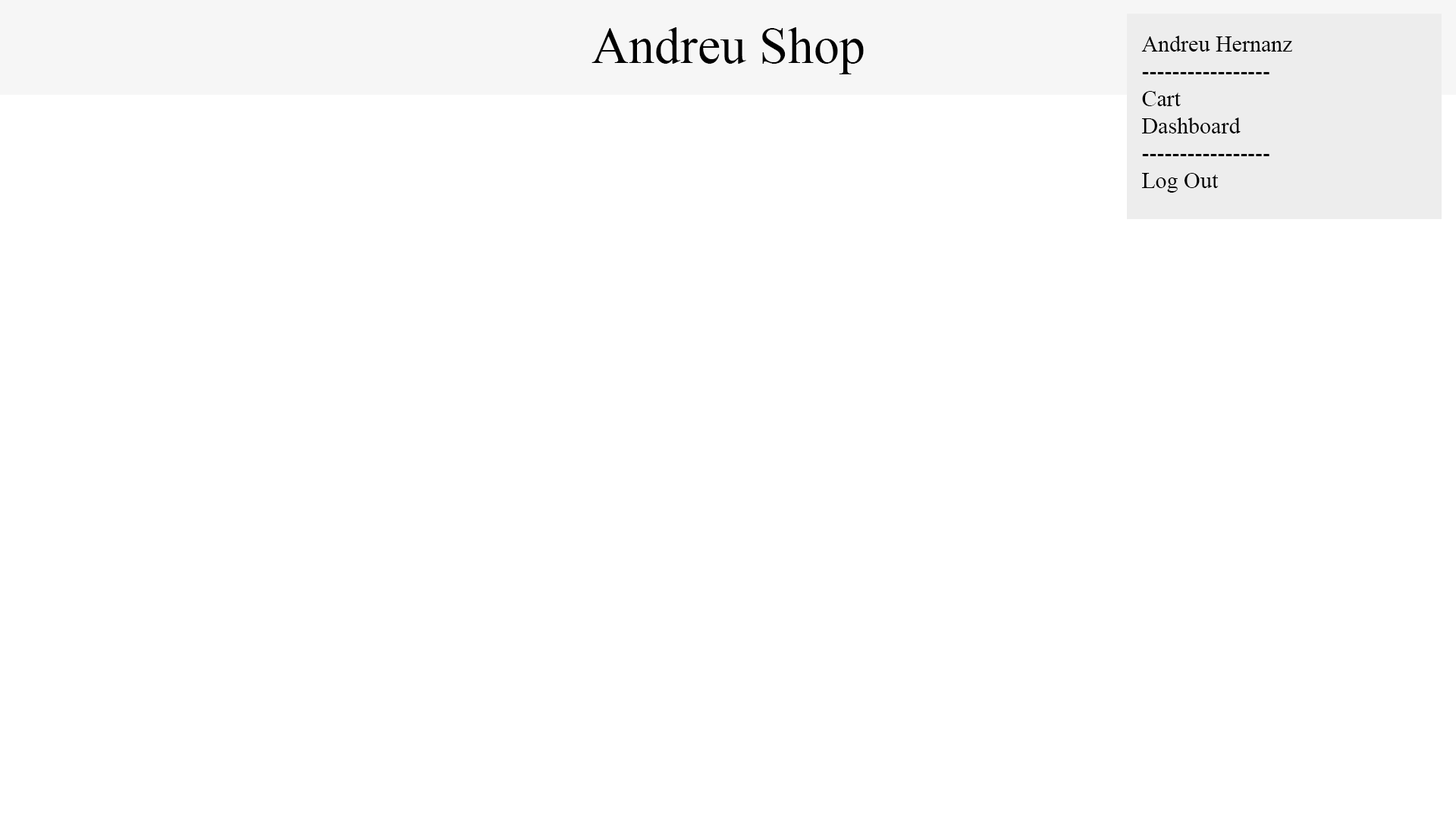
<style>
.page{position:relative;width:1456px;height:819px;background:#ffffff}
.page>*{position:absolute;margin:0}
.t1{font:51.6px "TimesNewRomanPSMT";color:#000000}
.t2{font:22.7px "TimesNewRomanPSMT";color:#000000}
</style>
<div class="page">
<p class="t1" style="left:591px;top:27px;width:273px;height:47px">Andreu Shop</p>
<p class="t2" style="left:1141px;top:36px;width:151px;height:157px">Andreu Hernanz<br>-----------------<br>Cart<br>Dashboard<br>-----------------<br>Log Out</p>
</div>
